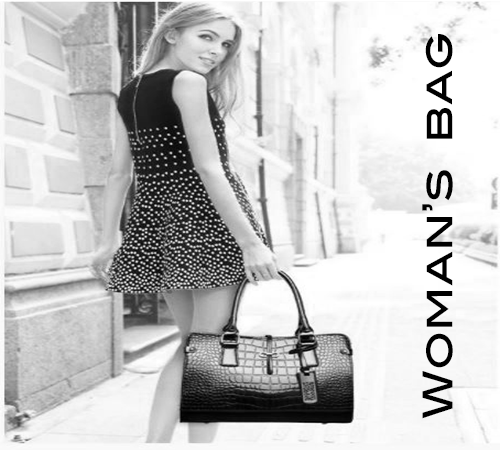
<style>
.page{position:relative;width:500px;height:450px}
.page>*{position:absolute;margin:0}
.t1{font:41.3px "BlairMdITCTTMedium";color:#000000}
</style>
<div class="page">
<p class="t1" style="left:422px;top:34px;width:31px;height:385px;rotate:-90deg">Woman’s  bag</p>
</div>
